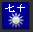
<style>
.page{position:relative;width:33px;height:32px;background:#000090}
.page>*{position:absolute;margin:0}
.t1{font:10.4px "SimSun";color:#ffffff}
</style>
<div class="page">
<p class="t1" style="left:5px;top:4px;width:20px;height:8px">七十</p>
</div>
